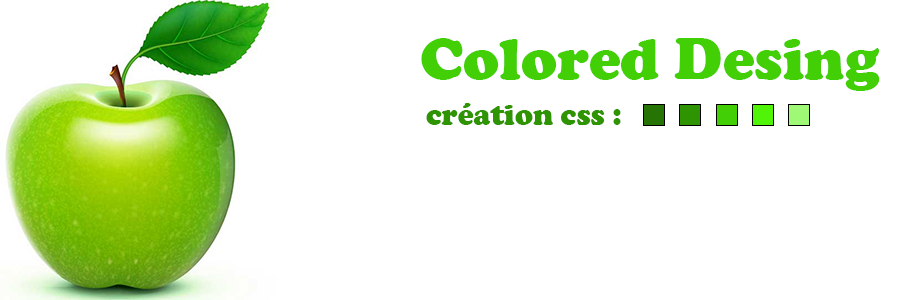
<style>
.page{position:relative;width:900px;height:300px;background:#ffffff}
.page>*{position:absolute;margin:0}
.t1{font:60px "CooperBlack";color:#43cf05}
.t2{font:30px "CooperBlack";color:#2e9401}
</style>
<div class="page">
<p class="t1" style="left:421px;top:38px;width:459px;height:53px">Colored Desing</p>
<p class="t2" style="left:426px;top:103px;width:195px;height:22px">création css :</p>
</div>
